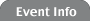
<style>
.page{position:relative;width:90px;height:21px;background:#818384}
.page>*{position:absolute;margin:0}
.t1{font:12px "Charcoal";color:#ffffff}
</style>
<div class="page">
<p class="t1" style="left:16px;top:7px;width:61px;height:10px">Event Info</p>
</div>
